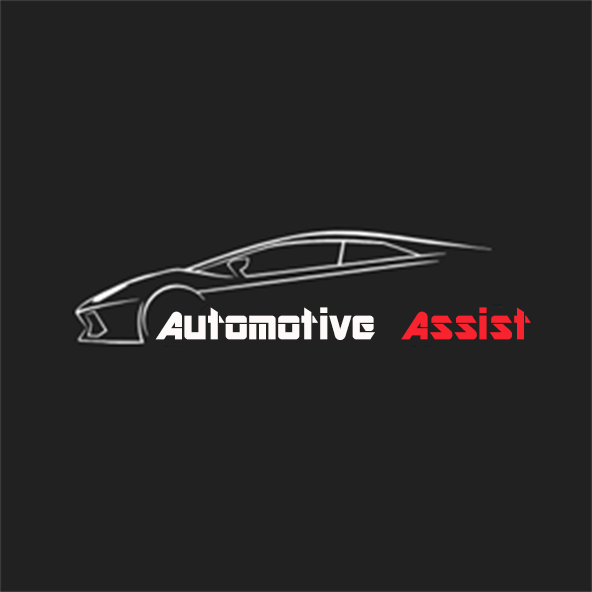
<style>
.page{position:relative;width:592px;height:592px;background:#212121}
.page>*{position:absolute;margin:0}
.t1{font:43.8px "ARDESTINE";color:#fefafa}
.t2{font:43.8px "ARDESTINE";color:#f92330}
</style>
<div class="page">
<p class="t1" style="left:155px;top:307px;width:376px;height:33px">Automotive <span class="t2">Assist</span></p>
</div>
